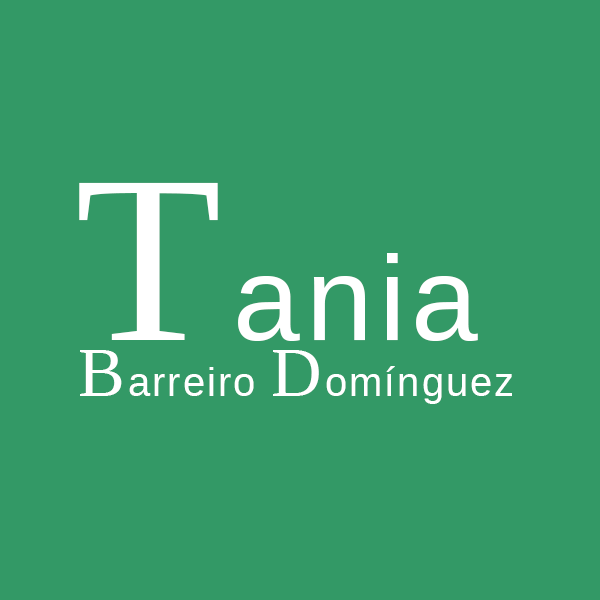
<style>
.page{position:relative;width:600px;height:600px;background:#339966}
.page>*{position:absolute;margin:0}
.t1{font:40px/14px "LiberationSans";letter-spacing:0.05em;color:#ffffff}
.t2{font:240px/14px "LiberationSerif";letter-spacing:0.05em;color:#ffffff}
.t3{font:120px/14px "LiberationSans";letter-spacing:0.05em;color:#ffffff}
.t4{font:70px/14px "LiberationSerif";letter-spacing:0.05em;color:#ffffff}
</style>
<div class="page">
<p class="t1" style="left:79px;top:182px;width:433px;height:222px;text-align:center"><span class="t2">T</span><span class="t3">ania <br><br><br><br></span><span class="t4">B</span>arreiro <span class="t4">D</span>omínguez</p>
</div>
